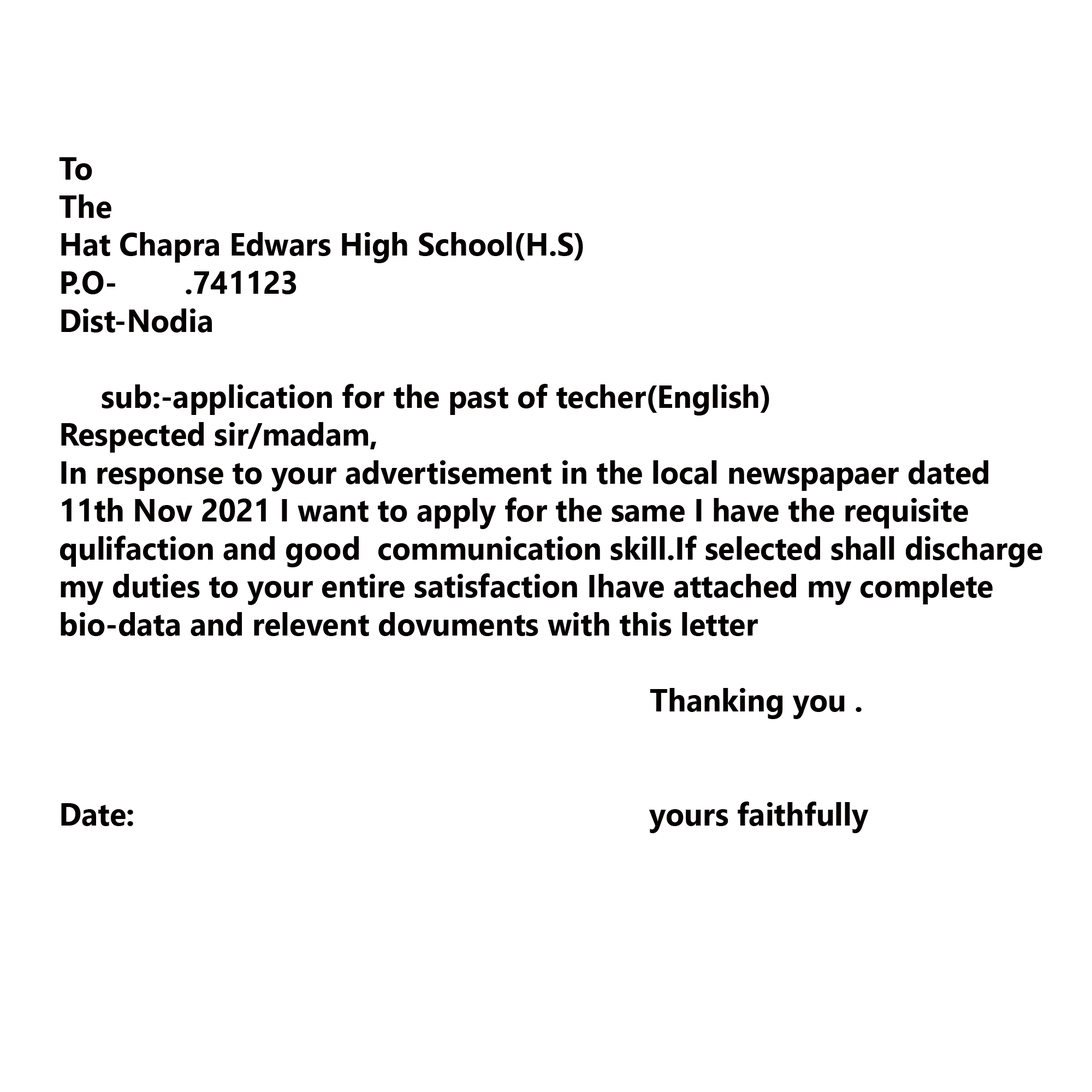
<style>
.page{position:relative;width:1092px;height:1092px;background:#ffffff}
.page>*{position:absolute;margin:0}
.t1{font:31.6px "SegoeUI-Bold";color:#040000;scale:0.97 1}
</style>
<div class="page">
<p class="t1" style="left:59px;top:157px;width:983px;height:676px">To<br>The<br>Hat Chapra Edwars High School(H.S)<br>P.O-        .741123<br>Dist-Nodia<br><br>     sub:-application for the past of techer(English)<br>Respected sir/madam,<br>In response to your advertisement in the local newspapaer dated<br>11th Nov 2021 I want to apply for the same I have the requisite<br>qulifaction and good  communication skill.If selected shall discharge<br>my duties to your entire satisfaction Ihave attached my complete<br>bio-data and relevent dovuments with this letter<br>                                                                     <br>                                                                      Thanking you .<br><br><br>Date:                                                             yours faithfully</p>
</div>
